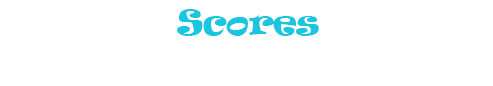
<style>
.page{position:relative;width:493px;height:86px;background:#ffffff}
.page>*{position:absolute;margin:0}
.t1{font:32px "Ravie";color:#19c5df}
</style>
<div class="page">
<p class="t1" style="left:177px;top:9px;width:142px;height:27px">Scores</p>
</div>
